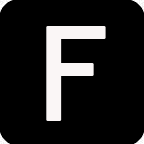
<style>
.page{position:relative;width:144px;height:144px;background:#000000}
.page>*{position:absolute;margin:0}
.t1{font:130.4px "TrebuchetMS";color:#faf6f6;font-weight:bold}
</style>
<div class="page">
<p class="t1" style="left:46px;top:26px;width:60px;height:95px">F</p>
</div>
